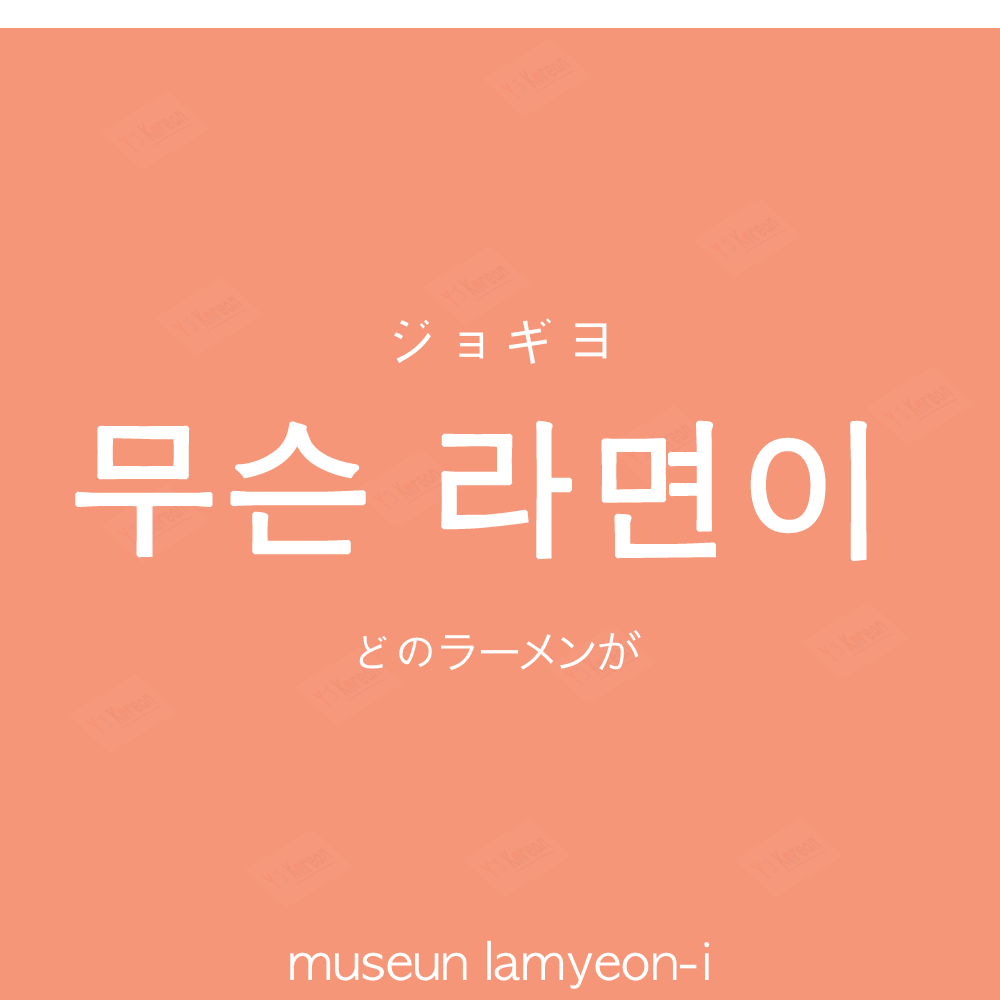
<style>
.page{position:relative;width:1000px;height:1000px;background:#f69679}
.page>*{position:absolute;margin:0}
.t1{font:60px "AppleGothic";color:#ffffff}
.t2{font:150px "AppleGothic";color:#ffffff;font-weight:bold}
.t3{font:45px "HiraKakuProN-W3";color:#ffffff}
.t4{font:45px "AppleGothic";color:#ffffff}
.t5{font:50px "AppleGothic";color:#ffffff}
</style>
<div class="page">
<p class="t1" style="left:394px;top:318px;width:213px;height:46px">ジョギヨ</p>
<p class="t2" style="left:75px;top:420px;width:792px;height:142px">무슨 라면이</p>
<p class="t3" style="left:359px;top:630px;width:282px;height:41px"><span class="t4">どの</span>ラーメンが</p>
<p class="t5" style="left:290px;top:940px;width:420px;height:49px">museun lamyeon-i</p>
</div>
